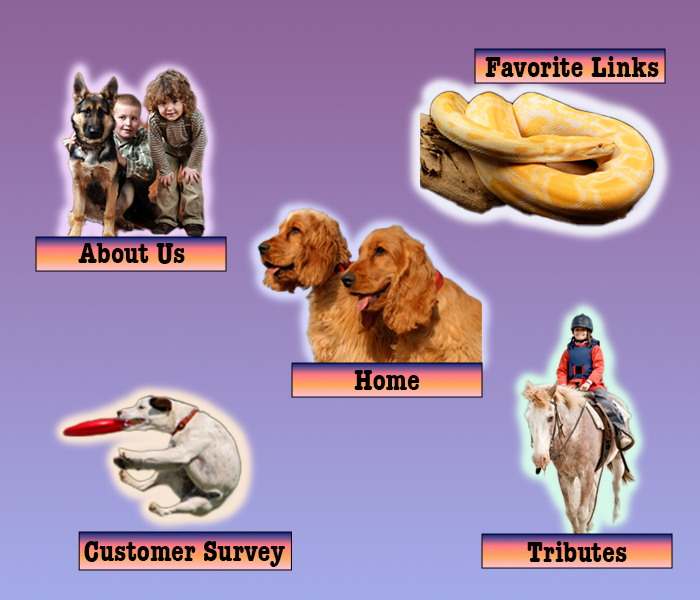
<style>
.page{position:relative;width:700px;height:600px}
.page>*{position:absolute;margin:0}
.t1{font:30px "AmericanTypewriter-CondensedBold";color:#020203}
</style>
<div class="page">
<p class="t1" style="left:485px;top:56px;width:174px;height:21px">Favorite Links</p>
<p class="t1" style="left:78px;top:243px;width:107px;height:21px">About Us</p>
<p class="t1" style="left:354px;top:370px;width:66px;height:20px">Home</p>
<p class="t1" style="left:84px;top:541px;width:201px;height:26px">Customer Survey</p>
<p class="t1" style="left:527px;top:541px;width:100px;height:21px">Tributes</p>
</div>
